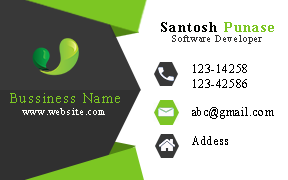
<style>
.page{position:relative;width:288px;height:180px;background:#ffffff}
.page>*{position:absolute;margin:0}
.t1{font:14px "TimesNewRomanPS-BoldMT";letter-spacing:0.1em;color:#020400}
.t2{font:14px "TimesNewRomanPS-BoldMT";letter-spacing:0.1em;color:#7cc623}
.t3{font:9px "TimesNewRomanPSMT";letter-spacing:0.1em;color:#333232}
.t4{font:12px "TimesNewRomanPSMT";letter-spacing:0.1em;color:#000000;scale:0.93 1}
.t5{font:14px "TimesNewRomanPSMT";letter-spacing:0.1em;color:#7cc623}
.t6{font:9px "TimesNewRomanPSMT";letter-spacing:0.1em;color:#fdfefa}
</style>
<div class="page">
<p class="t1" style="left:161px;top:22px;width:113px;height:10px">Santosh<span class="t2"> Punase</span></p>
<p class="t3" style="left:172px;top:35px;width:90px;height:9px">Software Developer</p>
<p class="t4" style="left:192px;top:64px;width:82px;height:81px">123-14258<br>123-42586<br><br>abc@gmail.com<br><br>Addess</p>
<p class="t5" style="left:10px;top:93px;width:110px;height:10px">Bussiness Name</p>
<p class="t6" style="left:22px;top:108px;width:83px;height:7px">www.website.com</p>
</div>
